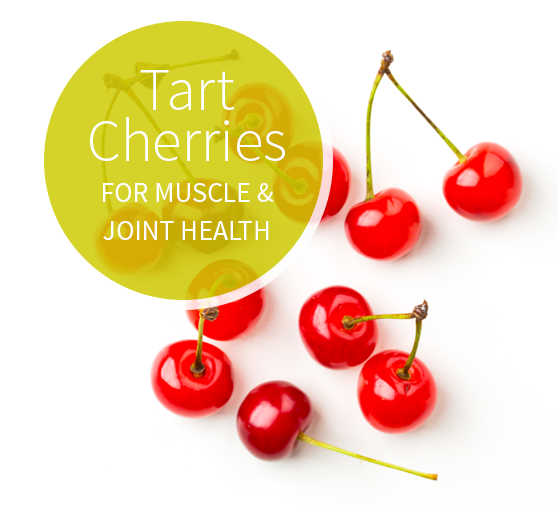
<style>
.page{position:relative;width:558px;height:511px;background:#ffffff}
.page>*{position:absolute;margin:0}
.t1{font:27.8px/41.7px "SourceSansPro-Regular";color:#ffffff;text-transform:uppercase}
.t2{font:60.3px/46.3px "SourceSansPro-Light";color:#ffffff}
.t3{font:60.3px/51px "SourceSansPro-Light";color:#ffffff}
.t4{font:27.8px/38px "SourceSansPro-Regular";color:#ffffff;text-transform:uppercase}
</style>
<div class="page">
<p class="t1" style="left:90px;top:70px;width:195px;height:170px;text-align:center"><span class="t2">Tart<br></span><span class="t3">Cherries<br></span>for muscle &amp; <span class="t4">joint health</span></p>
</div>
